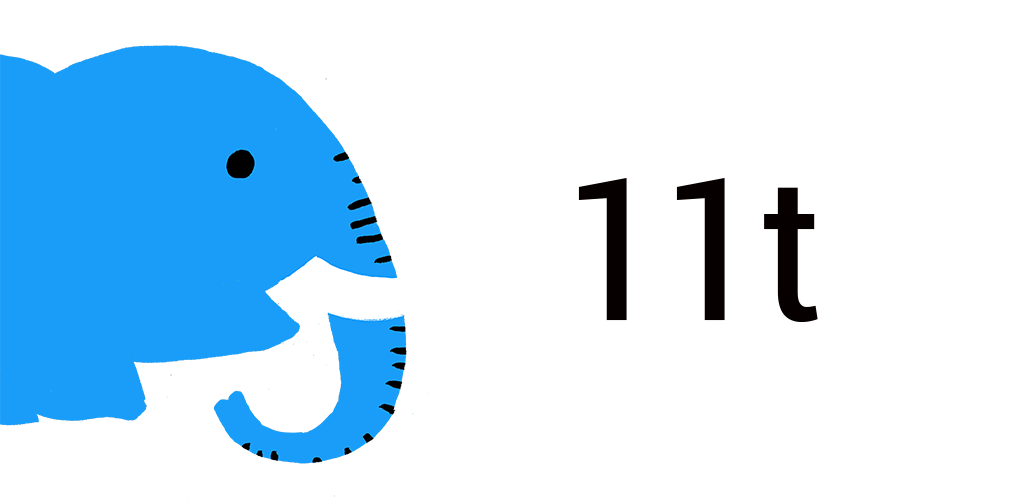
<style>
.page{position:relative;width:1024px;height:500px;background:#ffffff}
.page>*{position:absolute;margin:0}
.t1{font:200px "RobotoCondensed-Regular";color:#070000}
</style>
<div class="page">
<p class="t1" style="left:578px;top:178px;width:240px;height:144px">11t</p>
</div>
